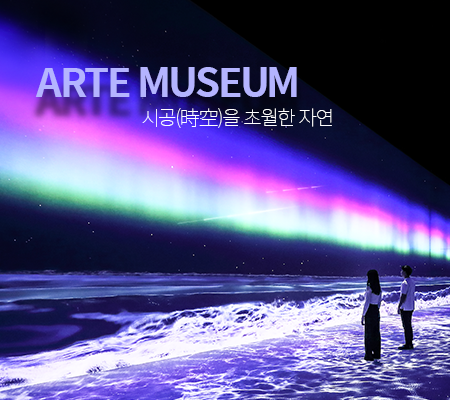
<style>
.page{position:relative;width:450px;height:400px}
.page>*{position:absolute;margin:0}
.t1{font:40px "SpoqaHanSansNeo-Bold";letter-spacing:-0.025em;color:#b4b4ff}
.t2{font:20px "SpoqaHanSansNeo-Thin";letter-spacing:-0.025em;color:#ffffff}
</style>
<div class="page">
<p class="t1" style="left:35px;top:67px;width:262px;height:30px">ARTE MUSEUM</p>
<p class="t2" style="left:142px;top:108px;width:190px;height:20px">시공(時空)을 초월한 자연</p>
</div>
